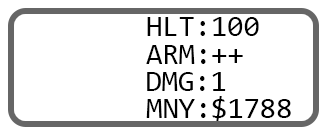
<style>
.page{position:relative;width:327px;height:135px;background:#ffffff}
.page>*{position:absolute;margin:0}
.t1{font:29.5px "Consolas";color:#000000}
</style>
<div class="page">
<p class="t1" style="left:147px;top:17px;width:112px;height:19px">HLT:100</p>
<p class="t1" style="left:146px;top:45px;width:97px;height:19px">ARM:++</p>
<p class="t1" style="left:147px;top:72px;width:79px;height:19px">DMG:1</p>
<p class="t1" style="left:146px;top:96px;width:145px;height:25px">MNY:$1788</p>
</div>
